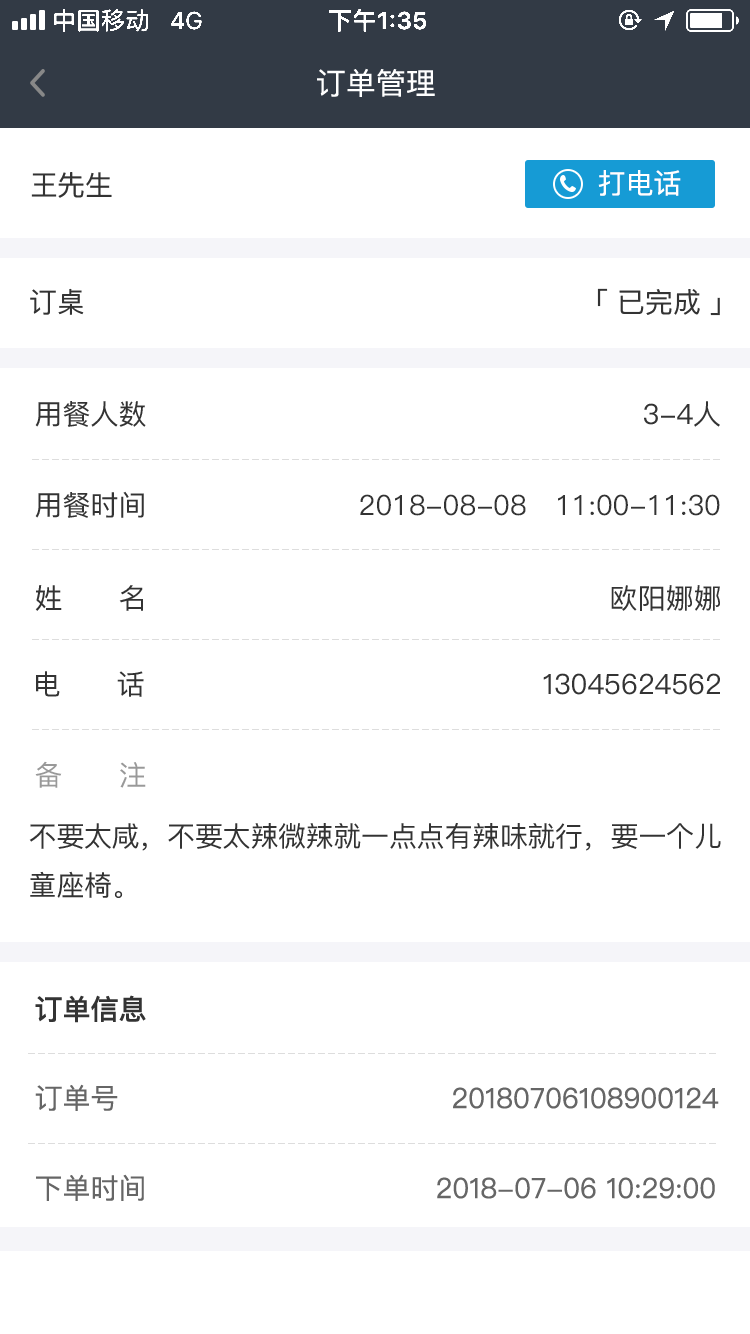
<style>
.page{position:relative;width:750px;height:1334px;background:#ffffff}
.page>*{position:absolute;margin:0}
.t1{font:30px "PingFangSC-Regular";color:#ffffff}
.t2{font:28px "PingFangSC-Regular";color:#333333}
.t3{font:28px "PingFang-SC-Medium";color:#ffffff}
.t4{font:28px "PingFang-SC-Medium";color:#333333}
.t5{font:28px "PingFangSC-Regular";color:#999999}
.t6{font:28px "PingFangSC-Regular";letter-spacing:-0.01em;color:#333333}
.t7{font:28px "PingFangSC-Medium";color:#333333}
.t8{font:28px "PingFangSC-Regular";color:#666666}
</style>
<div class="page">
<p class="t1" style="left:317px;top:68px;width:118px;height:29px">订单管理</p>
<p class="t2" style="left:31px;top:172px;width:81px;height:26px">王先生</p>
<p class="t3" style="left:598px;top:170px;width:83px;height:26px">打电话</p>
<p class="t2" style="left:30px;top:288px;width:54px;height:27px">订桌</p>
<p class="t2" style="left:597px;top:288px;width:123px;height:28px">「 已完成 」</p>
<p class="t2" style="left:35px;top:401px;width:111px;height:26px">用餐人数</p>
<p class="t2" style="left:644px;top:401px;width:76px;height:26px">3-4人</p>
<p class="t2" style="left:35px;top:491px;width:109px;height:27px">用餐时间</p>
<p class="t4" style="left:360px;top:494px;width:360px;height:22px">2018-08-08   11:00-11:30</p>
<p class="t2" style="left:35px;top:585px;width:108px;height:26px">姓      名</p>
<p class="t2" style="left:611px;top:585px;width:109px;height:26px">欧阳娜娜</p>
<p class="t2" style="left:36px;top:671px;width:108px;height:26px">电      话</p>
<p class="t2" style="left:543px;top:673px;width:177px;height:22px">13045624562</p>
<p class="t5" style="left:35px;top:761px;width:111px;height:27px">备      注</p>
<p class="t6" style="left:29px;top:823px;width:692px;height:75px">不要太咸，不要太辣微辣就一点点有辣味就行，要一个儿<br>童座椅。</p>
<p class="t7" style="left:35px;top:995px;width:111px;height:28px">订单信息</p>
<p class="t8" style="left:35px;top:1084px;width:684px;height:27px">订单号                                    20180706108900124</p>
<p class="t8" style="left:36px;top:1174px;width:679px;height:27px">下单时间                               2018-07-06 10:29:00</p>
</div>
